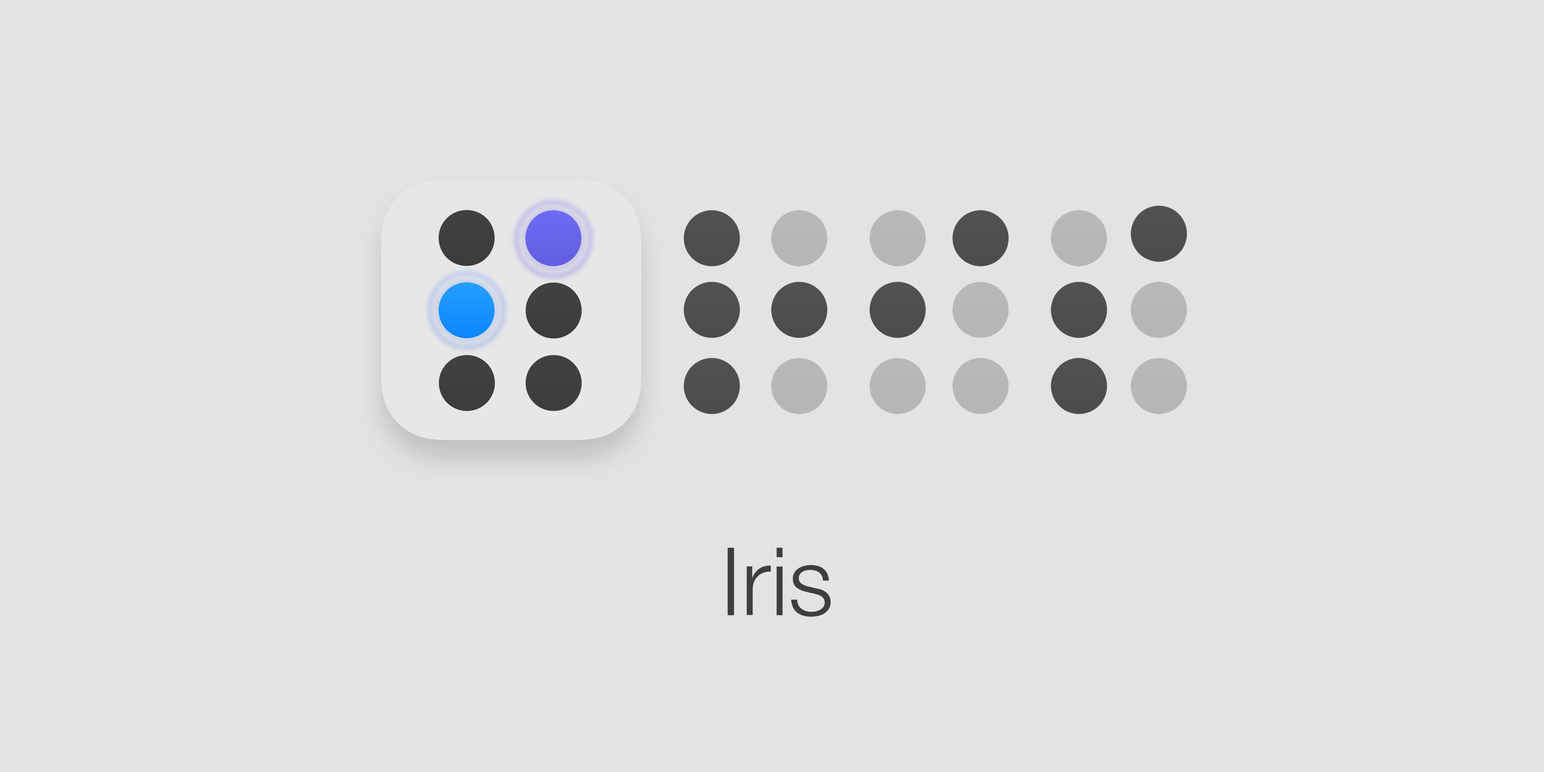
<style>
.page{position:relative;width:1544px;height:772px;background:#e3e3e3}
.page>*{position:absolute;margin:0}
.t1{font:94.3px "HelveticaNeue-Light";color:#3e3e3e}
</style>
<div class="page">
<p class="t1" style="left:728px;top:548px;width:103px;height:69px">Iris</p>
</div>
